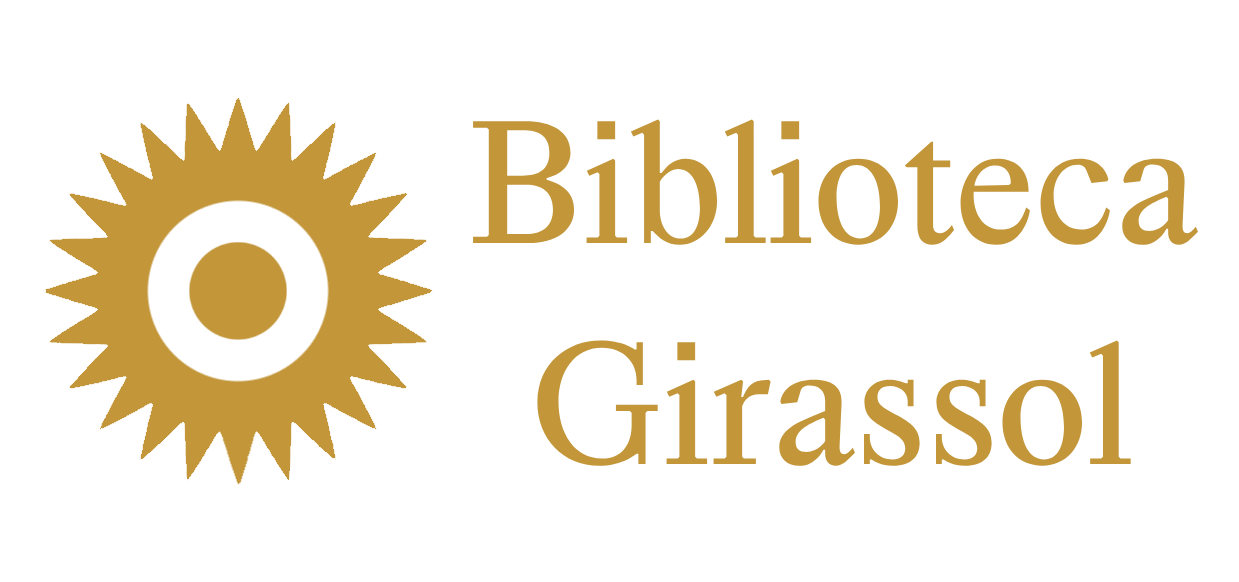
<style>
.page{position:relative;width:1239px;height:582px;background:#ffffff}
.page>*{position:absolute;margin:0}
.t1{font:183.9px "HappyTimesattheIKOB-Regular";color:#c29639}
</style>
<div class="page">
<p class="t1" style="left:473px;top:119px;width:725px;height:347px;text-align:center">Biblioteca<br>Girassol</p>
</div>
